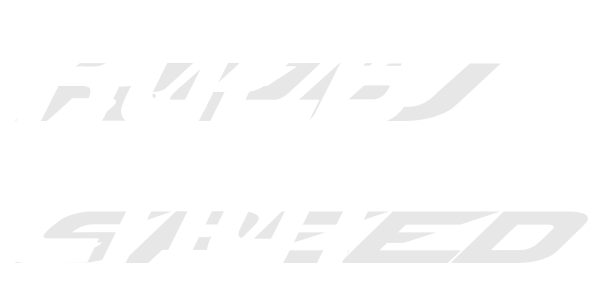
<style>
.page{position:relative;width:614px;height:300px;background:#ffffff}
.page>*{position:absolute;margin:0}
.t1{font:150px "NFSfont";letter-spacing:0.03em;color:#ffffff;scale:0.88 1}
.t2{font:90px "NFSfont";letter-spacing:0.03em;scale:1.97 1}
.t3{font:80px "NFSfont";letter-spacing:0.03em;color:#e7e7e7;scale:1.81 1}
</style>
<div class="page">
<p class="t1" style="left:15px;top:26px;width:421px;height:98px">КИЕВ</p>
<p class="t2" style="left:15px;top:62px;width:486px;height:59px">KYIV</p>
<p class="t1" style="left:9px;top:165px;width:428px;height:98px">СПИТ</p>
<p class="t3" style="left:15px;top:211px;width:573px;height:52px">SPEED</p>
</div>
